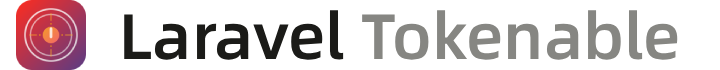
<style>
.page{position:relative;width:720px;height:70px;background:#ffffff}
.page>*{position:absolute;margin:0}
.t1{font:64px "AlibabaPuHuiTi-Medium";color:#868682}
.t2{font:64px "AlibabaPuHuiTi-Medium";color:#1b1b18}
</style>
<div class="page">
<p class="t1" style="left:124px;top:10px;width:554px;height:50px"><span class="t2">Laravel </span>Tokenable</p>
</div>
